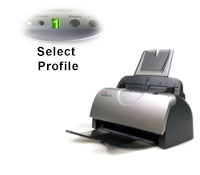
<style>
.page{position:relative;width:200px;height:175px;background:#ffffff}
.page>*{position:absolute;margin:0}
.t1{font:12px "Arial-BoldMT";letter-spacing:0.05em;color:#b3ff75}
.t2{font:12px "Arial-BoldMT";letter-spacing:0.05em;color:#000000}
</style>
<div class="page">
<p class="t1" style="left:53px;top:19px;width:5px;height:10px">1</p>
<p class="t2" style="left:37px;top:46px;width:41px;height:25px;text-align:center">Select <br>Profile</p>
</div>
